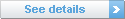
<style>
.page{position:relative;width:125px;height:19px}
.page>*{position:absolute;margin:0}
.t1{font:11px "Arial-BoldMT";color:#5ca5dc}
</style>
<div class="page">
<p class="t1" style="left:25px;top:5px;width:60px;height:8px">See details</p>
</div>
